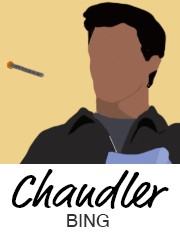
<style>
.page{position:relative;width:180px;height:240px;background:#eed18a}
.page>*{position:absolute;margin:0}
.t1{font:48px "MarketPro";color:#000000}
.t2{font:18px "Helvetica";color:#313131;text-transform:uppercase}
</style>
<div class="page">
<p class="t1" style="left:12px;top:169px;width:157px;height:40px">Chandler</p>
<p class="t2" style="left:67px;top:214px;width:42px;height:13px">Bing</p>
</div>
